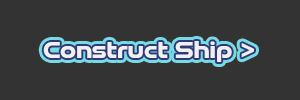
<style>
.page{position:relative;width:300px;height:100px;background:#333333}
.page>*{position:absolute;margin:0}
.t1{font:24px "GoodTimingRg-Bold";color:#f0f0f0}
</style>
<div class="page">
<p class="t1" style="left:43px;top:41px;width:211px;height:21px">Construct Ship &gt;</p>
</div>
